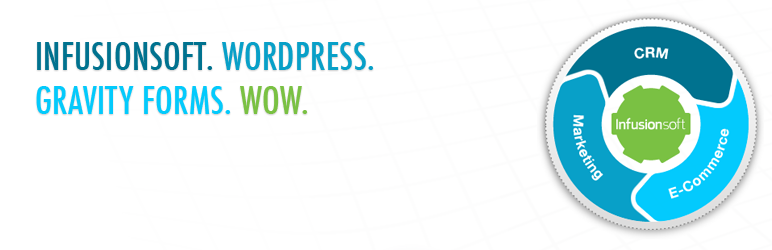
<style>
.page{position:relative;width:772px;height:250px;background:#ffffff}
.page>*{position:absolute;margin:0}
.t1{font:36.7px "Futura-CondensedMedium";letter-spacing:0.01em;color:#03cafc;text-transform:uppercase}
.t2{font:36.7px "Futura-CondensedMedium";letter-spacing:0.01em;color:#00728f;text-transform:uppercase}
.t3{font:36.7px "Futura-CondensedMedium";letter-spacing:0.01em;color:#08a0c8;text-transform:uppercase}
.t4{font:36.7px "Futura-CondensedMedium";letter-spacing:0.01em;color:#7ac143;text-transform:uppercase}
</style>
<div class="page">
<p class="t1" style="left:36px;top:42px;width:338px;height:72px"><span class="t2">Infusionsoft. </span><span class="t3">wordPress. <br></span>Gravity forms. <span class="t4">Wow.</span></p>
</div>
